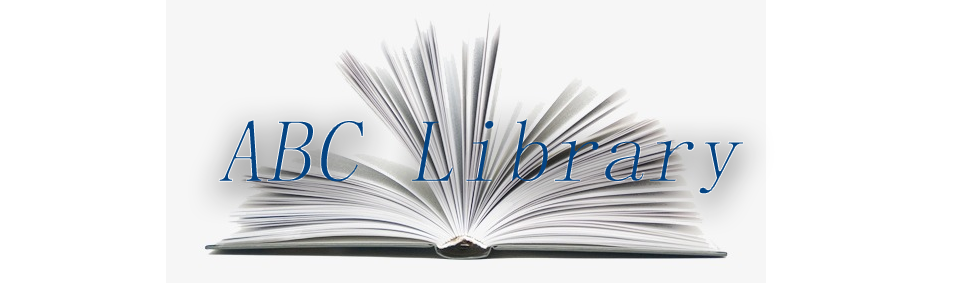
<style>
.page{position:relative;width:960px;height:300px;background:#ffffff}
.page>*{position:absolute;margin:0}
.t1{font:90px "SimSun";font-weight:bold;font-style:italic}
</style>
<div class="page">
<p class="t1" style="left:218px;top:118px;width:526px;height:77px">ABC Library</p>
</div>
